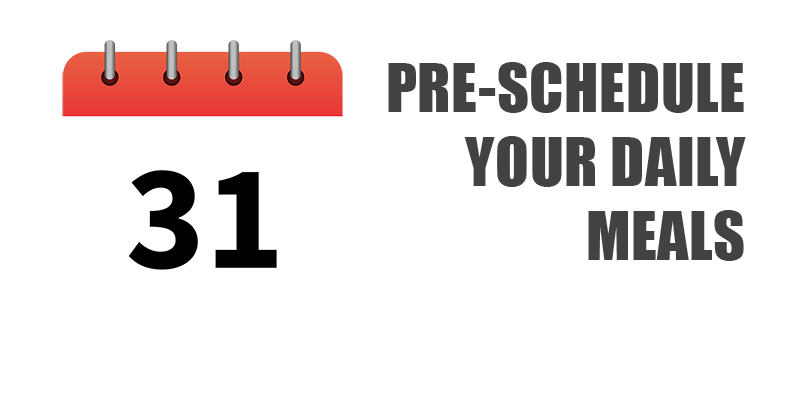
<style>
.page{position:relative;width:800px;height:400px;background:#ffffff}
.page>*{position:absolute;margin:0}
.t1{font:62px "Impact";letter-spacing:0.01em;color:#424242}
</style>
<div class="page">
<p class="t1" style="left:388px;top:62px;width:358px;height:199px;text-align:right">PRE-SCHEDULE<br>YOUR DAILY<br>MEALS</p>
</div>
